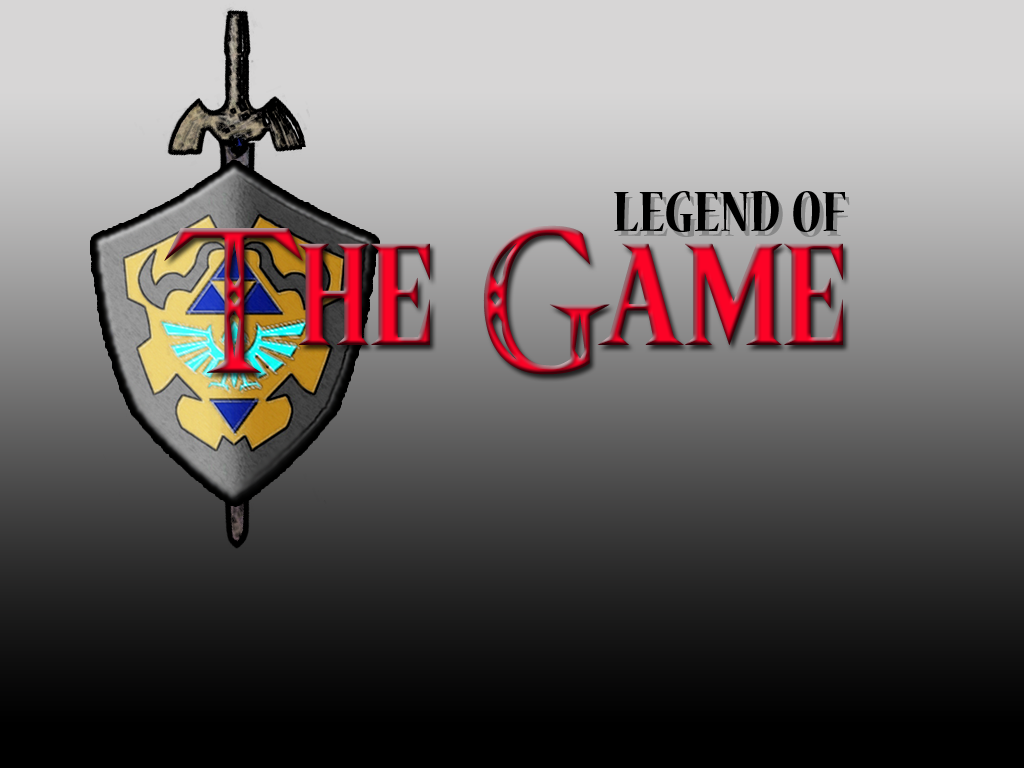
<style>
.page{position:relative;width:1024px;height:768px}
.page>*{position:absolute;margin:0}
.t1{font:64px "NuevaStd-BoldCond";color:#000000}
.t2{font:166.7px "Triforce"}
</style>
<div class="page">
<p class="t1" style="left:614px;top:191px;width:232px;height:41px">LEGEND OF</p>
<p class="t2" style="left:164px;top:225px;width:679px;height:150px">The Game</p>
</div>
